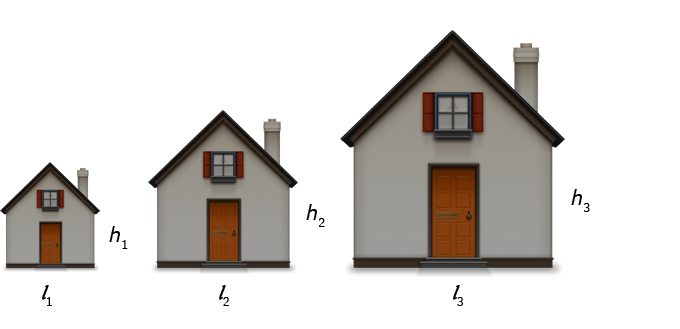
<style>
.page{position:relative;width:680px;height:329px;background:#ffffff}
.page>*{position:absolute;margin:0}
.t1{font:19.8px "Verdana-Italic";color:#000000}
.t2{font:19.8px "Verdana";color:#000000}
.t3{font:20.9px "Vivaldii";color:#000000;font-weight:bold}
</style>
<div class="page">
<p class="t1" style="left:571px;top:189px;width:19px;height:23px">h<span class="t2">3</span></p>
<p class="t1" style="left:306px;top:204px;width:19px;height:23px">h<span class="t2">2</span></p>
<p class="t1" style="left:109px;top:226px;width:19px;height:23px">h<span class="t2">1</span></p>
<p class="t3" style="left:42px;top:285px;width:10px;height:21px">l<span class="t2">1</span></p>
<p class="t3" style="left:219px;top:285px;width:11px;height:21px">l<span class="t2">2</span></p>
<p class="t3" style="left:453px;top:285px;width:10px;height:21px">l<span class="t2">3</span></p>
</div>
